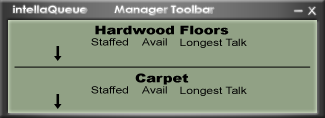
<style>
.page{position:relative;width:325px;height:118px;background:#91a185}
.page>*{position:absolute;margin:0}
.t1{font:10px "CenturyGothic-Bold";color:#ffffff;scale:1.2 1}
.t2{font:10px "ArialMT";scale:1.2 1}
.t3{font:12px "Arial-Black";color:#000000;scale:1.2 1}
.t4{font:10px "ArialMT";color:#000000;scale:1.2 1}
</style>
<div class="page">
<p class="t1" style="left:13px;top:5px;width:74px;height:9px">intellaQueue</p>
<p class="t1" style="left:114px;top:5px;width:100px;height:10px">Manager Toolbar</p>
<p class="t2" style="left:308px;top:7px;width:8px;height:8px">X</p>
<p class="t3" style="left:95px;top:25px;width:134px;height:10px">Hardwood Floors</p>
<p class="t4" style="left:91px;top:38px;width:37px;height:8px">Staffed</p>
<p class="t4" style="left:142px;top:38px;width:25px;height:8px">Avail</p>
<p class="t4" style="left:180px;top:38px;width:67px;height:10px">Longest Talk</p>
<p class="t3" style="left:135px;top:73px;width:54px;height:12px">Carpet</p>
<p class="t4" style="left:91px;top:86px;width:37px;height:8px">Staffed</p>
<p class="t4" style="left:142px;top:86px;width:25px;height:8px">Avail</p>
<p class="t4" style="left:180px;top:86px;width:67px;height:10px">Longest Talk</p>
</div>
